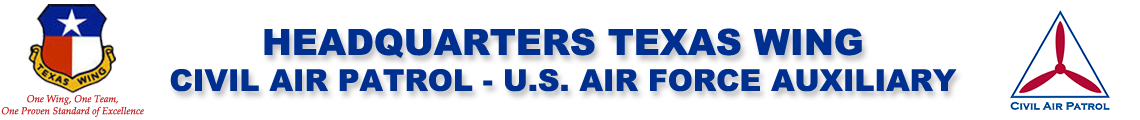
<style>
.page{position:relative;width:1140px;height:120px;background:#ffffff}
.page>*{position:absolute;margin:0}
.t1{font:30px "Arial-Black";color:#00308f}
.t2{font:36px "Arial-Black";color:#00308f}
.t3{font:10px "PalatinoLinotype-Italic";color:#c52023}
</style>
<div class="page">
<p class="t1" style="left:170px;top:28px;width:787px;height:64px;text-align:center"><span class="t2">HEADQUARTERS TEXAS WING<br></span>CIVIL AIR PATROL - U.S. AIR FORCE AUXILIARY</p>
<p class="t3" style="left:1px;top:95px;width:143px;height:22px;text-align:center">One Wing, One Team,<br>One Proven Standard of Excellence</p>
</div>
